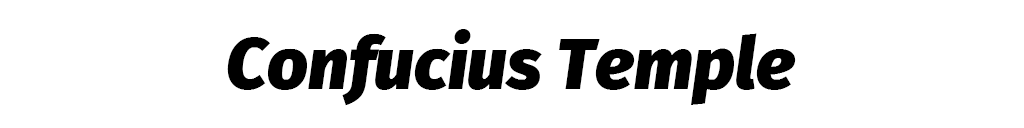
<style>
.page{position:relative;width:1024px;height:128px;background:#ffffff}
.page>*{position:absolute;margin:0}
.t1{font:71.8px "FiraSans-BlackItalic";color:#000000}
</style>
<div class="page">
<p class="t1" style="left:227px;top:29px;width:569px;height:77px">Confucius Temple</p>
</div>
